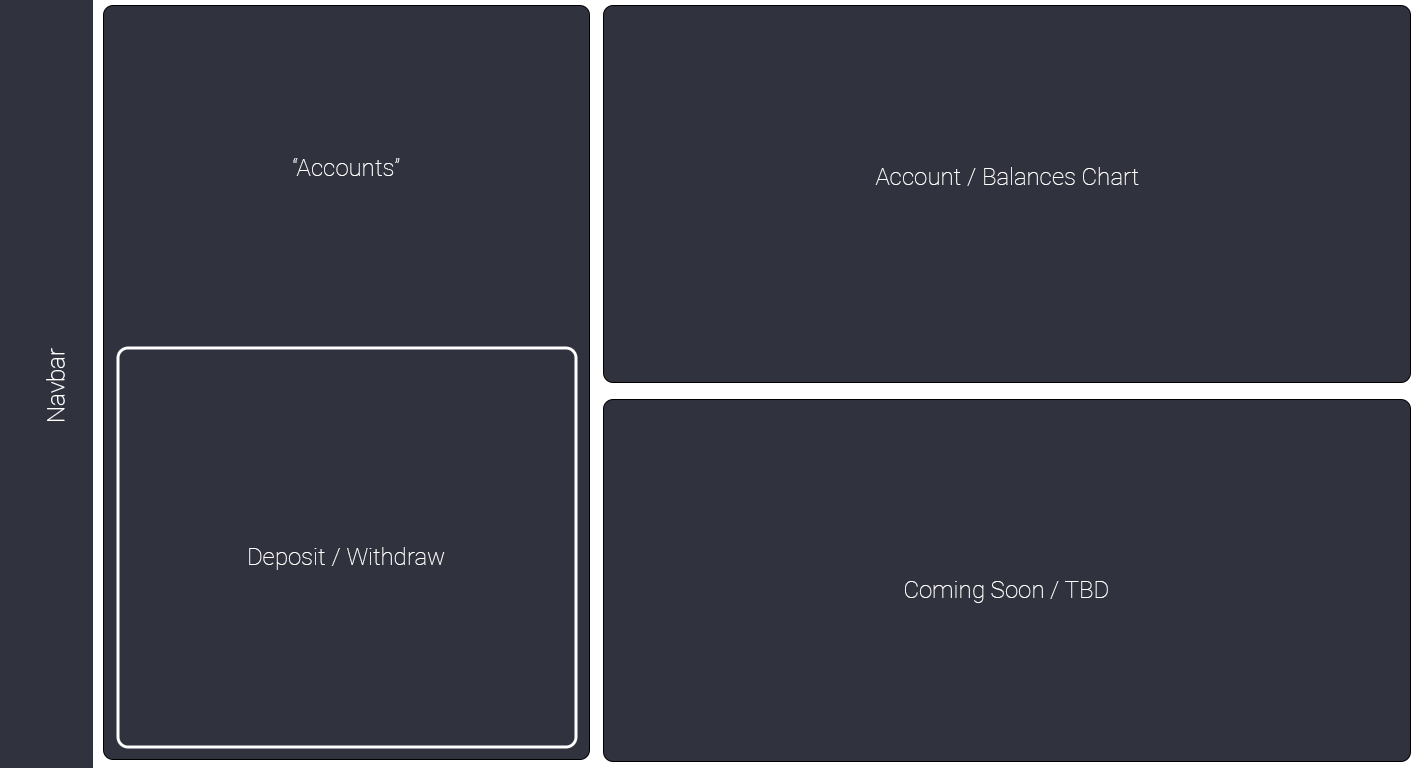
<style>
.page{position:relative;width:1424px;height:768px;background:#30323e}
.page>*{position:absolute;margin:0}
.t1{font:24px "Roboto-Thin";color:#ffffff}
</style>
<div class="page">
<p class="t1" style="left:293px;top:158px;width:107px;height:18px">“Accounts”</p>
<p class="t1" style="left:875px;top:167px;width:264px;height:19px">Account / Balances Chart</p>
<p class="t1" style="left:46px;top:348px;width:19px;height:73px;rotate:-90deg">Navbar</p>
<p class="t1" style="left:249px;top:547px;width:196px;height:23px">Deposit / Withdraw</p>
<p class="t1" style="left:905px;top:581px;width:203px;height:22px">Coming Soon / TBD</p>
</div>
